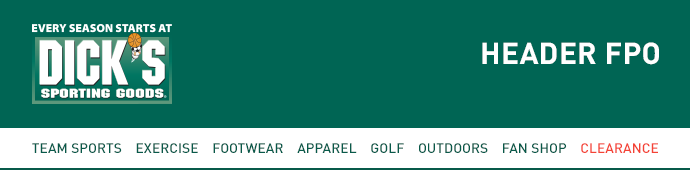
<style>
.page{position:relative;width:690px;height:170px;background:#006554}
.page>*{position:absolute;margin:0}
.t1{font:30px "DIN-Bold";letter-spacing:0.01em;color:#ffffff}
.t2{font:13.6px "DIN-Medi";letter-spacing:0.01em;color:#085a4a}
.t3{font:13.6px "DIN-Medi";letter-spacing:0.01em;color:#f44336}
</style>
<div class="page">
<p class="t1" style="left:482px;top:42px;width:177px;height:23px">HEADER FPO</p>
<p class="t2" style="left:32px;top:143px;width:626px;height:10px">TEAM SPORTS    EXERCISE    FOOTWEAR    APPAREL    GOLF    OUTDOORS    FAN SHOP    <span class="t3">CLEARANCE</span></p>
</div>
